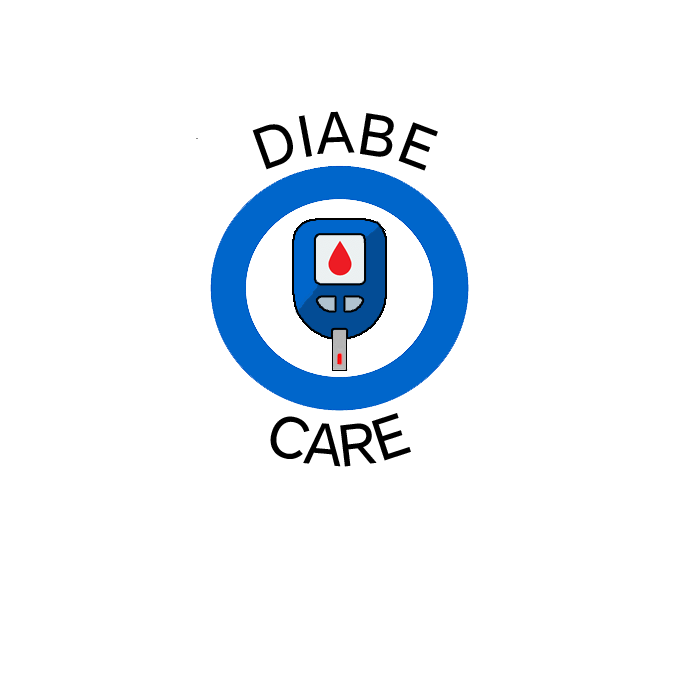
<style>
.page{position:relative;width:700px;height:700px;background:#ffffff}
.page>*{position:absolute;margin:0}
.t1{font:60px "72-Regular";color:#000000}
</style>
<div class="page">
<p class="t1" style="left:252px;top:111px;width:186px;height:60px">DIABE</p>
<p class="t1" style="left:270px;top:413px;width:141px;height:54px">CARE</p>
</div>
